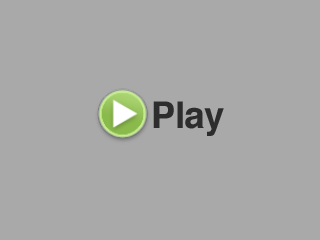
<style>
.page{position:relative;width:320px;height:240px;background:#a9a9a9}
.page>*{position:absolute;margin:0}
.t1{font:36.8px "Helvetica-Bold";letter-spacing:-0.025em;color:#2d2d2d}
</style>
<div class="page">
<p class="t1" style="left:153px;top:101px;width:71px;height:35px">Play</p>
</div>
